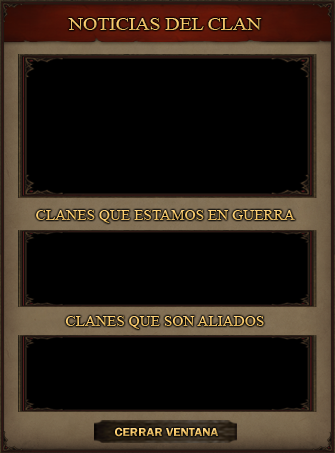
<style>
.page{position:relative;width:335px;height:453px;background:#000000}
.page>*{position:absolute;margin:0}
.t1{font:18px "TimesNewRomanPSMT";color:#f6c767;scale:1.09 1}
.t2{font:14px "TimesNewRomanPSMT";scale:1.09 1}
.t3{font:12px "FranklinGothic-Demi";scale:1.07 1}
</style>
<div class="page">
<p class="t1" style="left:68px;top:18px;width:194px;height:12px">NOTICIAS DEL CLAN</p>
<p class="t2" style="left:36px;top:210px;width:259px;height:13px">CLANES QUE ESTAMOS EN GUERRA</p>
<p class="t2" style="left:65px;top:316px;width:199px;height:13px">CLANES QUE SON ALIADOS</p>
<p class="t3" style="left:115px;top:427px;width:104px;height:10px">CERRAR VENTANA</p>
</div>
